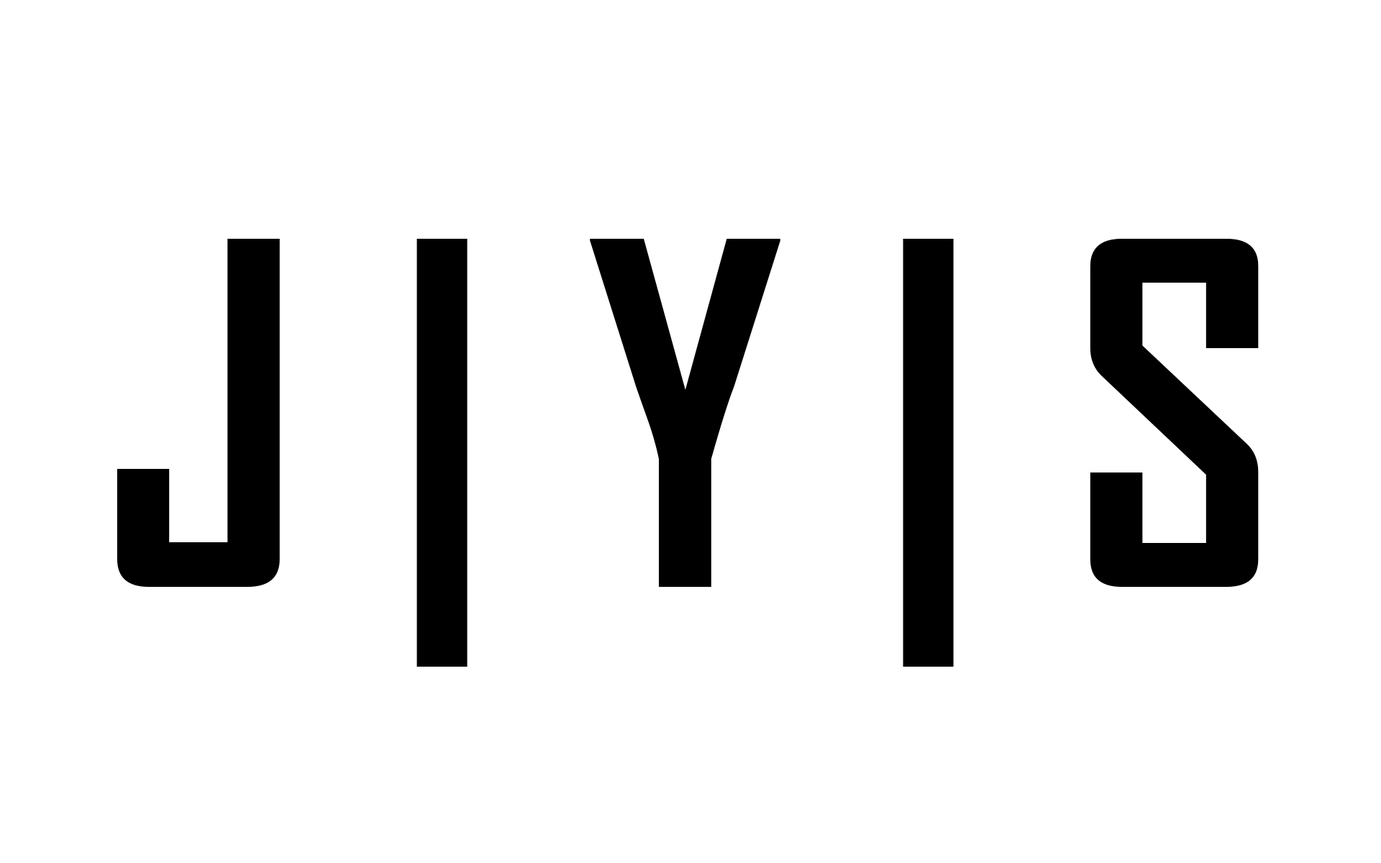
<style>
.page{position:relative;width:1381px;height:863px;background:#ffffff}
.page>*{position:absolute;margin:0}
.t1{font:456.3px "AgencyFB-Bold";color:#000000}
</style>
<div class="page">
<p class="t1" style="left:117px;top:239px;width:1142px;height:428px">J | Y | S</p>
</div>
